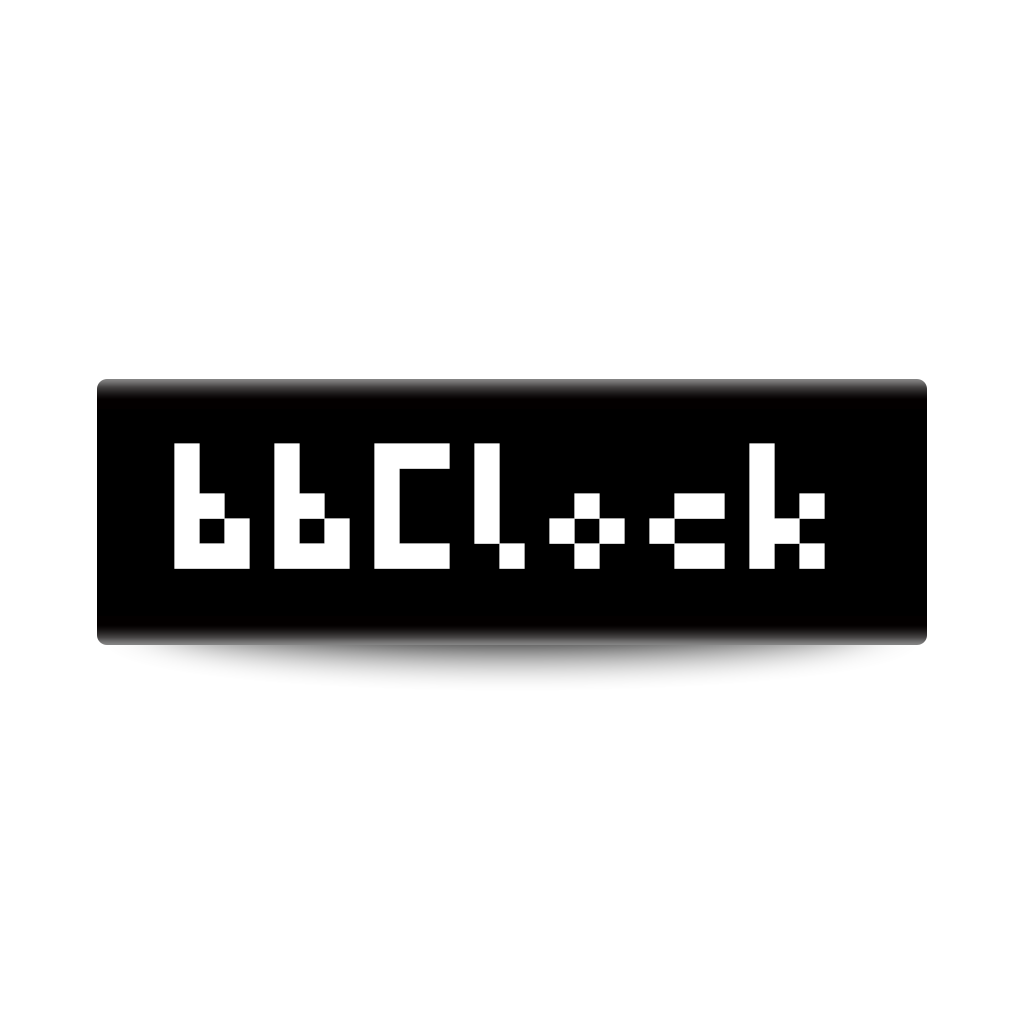
<style>
.page{position:relative;width:1024px;height:1024px;background:#ffffff}
.page>*{position:absolute;margin:0}
.t1{font:200px "PixelCorebb";color:#ffffff}
</style>
<div class="page">
<p class="t1" style="left:174px;top:443px;width:651px;height:126px">bbClock</p>
</div>
